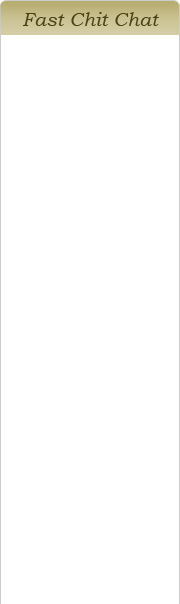
<style>
.page{position:relative;width:180px;height:604px;background:#ffffff}
.page>*{position:absolute;margin:0}
.t1{font:19.4px "BookmanOldStyle-Italic";color:#4a4215}
</style>
<div class="page">
<p class="t1" style="left:22px;top:12px;width:137px;height:14px">Fast Chit Chat</p>
</div>
